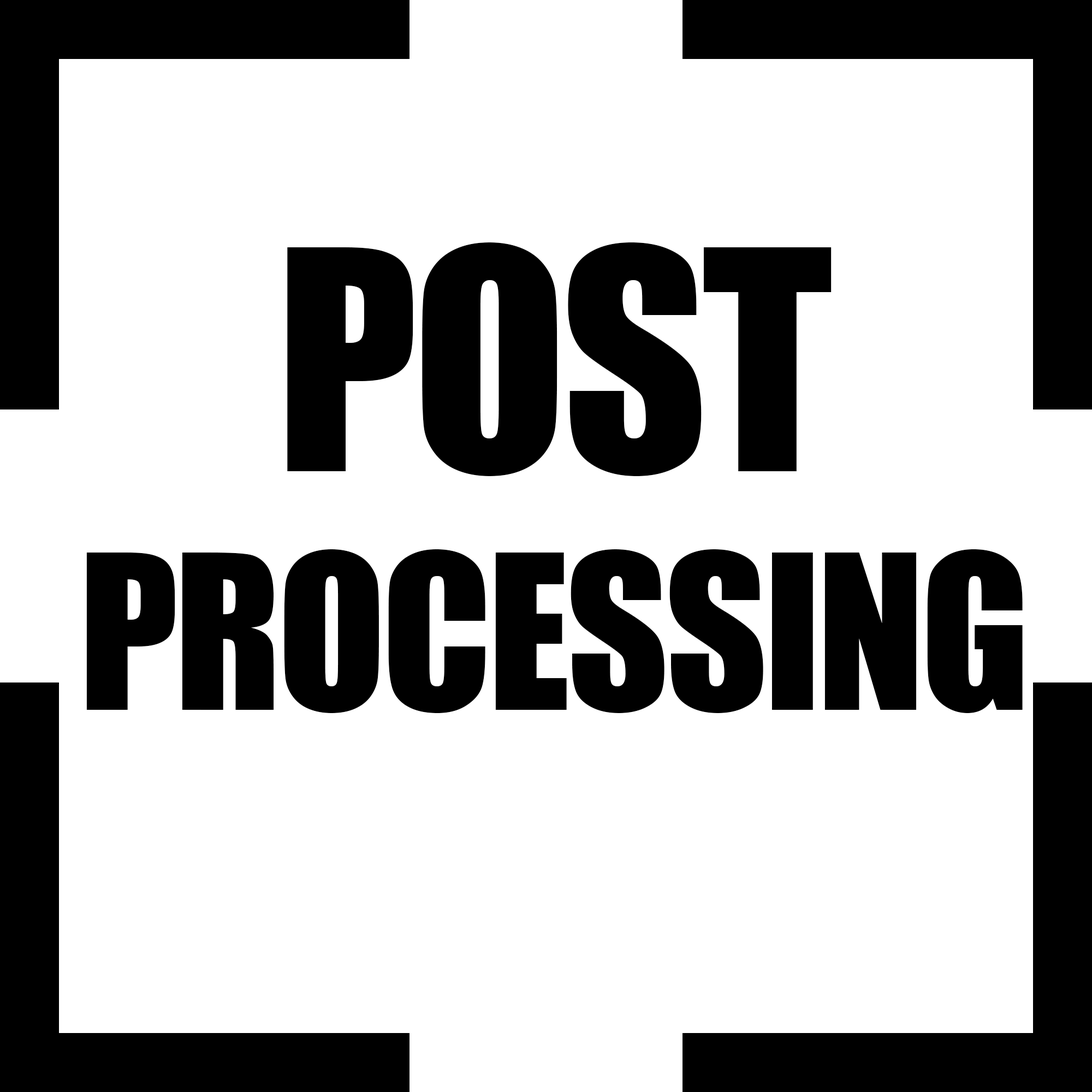
<style>
.page{position:relative;width:1092px;height:1092px;background:#ffffff}
.page>*{position:absolute;margin:0}
.t1{font:198.5px "Impact";letter-spacing:-0.02em;color:#000000}
.t2{font:283.1px "Impact";letter-spacing:-0.02em;color:#000000}
</style>
<div class="page">
<p class="t1" style="left:86px;top:242px;width:937px;height:471px;text-align:center"><span class="t2">POST<br></span>PROCESSING</p>
</div>
